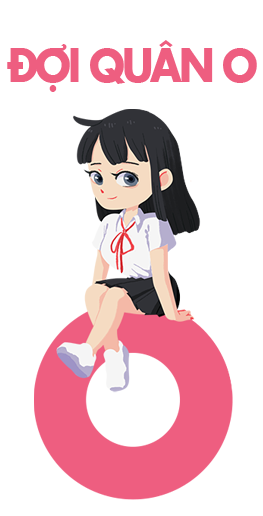
<style>
.page{position:relative;width:263px;height:516px;background:#ffffff}
.page>*{position:absolute;margin:0}
.t1{font:44px "SFUFuturaBold";letter-spacing:-0.075em;color:#ee5e80;scale:0.92 1}
</style>
<div class="page">
<p class="t1" style="left:7px;top:40px;width:250px;height:52px">ĐỢI QUÂN O</p>
</div>
